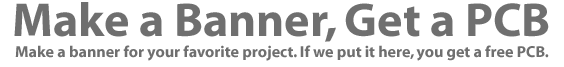
<style>
.page{position:relative;width:564px;height:67px;background:#ffffff}
.page>*{position:absolute;margin:0}
.t1{font:48px "Myriad-Bold";color:#6f6f6f}
.t2{font:16px "Myriad-Bold";color:#6f6f6f}
</style>
<div class="page">
<p class="t1" style="left:14px;top:2px;width:535px;height:40px">Make a Banner, Get a PCB</p>
<p class="t2" style="left:15px;top:45px;width:534px;height:16px">Make a banner for your favorite project. If we put it here, you get a free PCB.</p>
</div>
